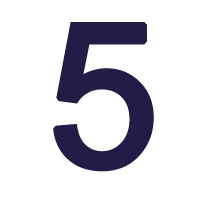
<style>
.page{position:relative;width:200px;height:200px;background:#ffffff}
.page>*{position:absolute;margin:0}
.t1{font:200px "ArialMT";color:#241b47;font-weight:bold}
</style>
<div class="page">
<p class="t1" style="left:53px;top:22px;width:101px;height:150px">5</p>
</div>
